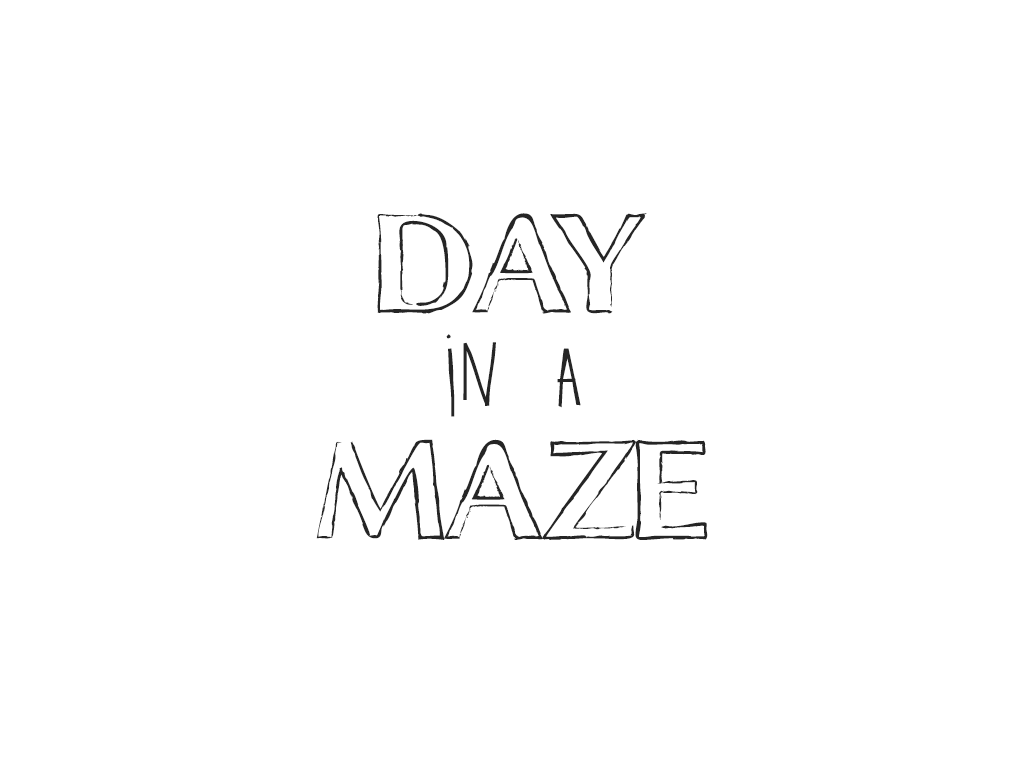
<style>
.page{position:relative;width:1024px;height:768px;background:#ffffff}
.page>*{position:absolute;margin:0}
.t1{font:100px "ChalkLine-Outline";color:#252525}
.t2{font:120px "Two-TurtleDoves";color:#252525}
</style>
<div class="page">
<p class="t1" style="left:377px;top:213px;width:270px;height:101px">Day</p>
<p class="t2" style="left:446px;top:334px;width:135px;height:83px">iN A</p>
<p class="t1" style="left:316px;top:439px;width:392px;height:101px">maze</p>
</div>
